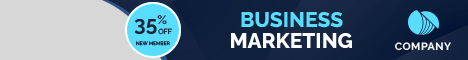
<style>
.page{position:relative;width:468px;height:60px;background:#d7d7d7}
.page>*{position:absolute;margin:0}
.t1{font:21px "Raleway-Bold";color:#192437}
.t2{font:20.9px "Raleway-ExtraBold";color:#58ddfe}
.t3{font:7.2px "Raleway-Medium";color:#192437}
.t4{font:4.9px "Raleway-Medium";color:#192437}
.t5{font:20.9px "Raleway-ExtraBold";color:#ffffff}
.t6{font:10.5px "Raleway-Bold";letter-spacing:0.05em;color:#ffffff}
</style>
<div class="page">
<p class="t1" style="left:134px;top:15px;width:33px;height:20px">35%</p>
<p class="t2" style="left:241px;top:12px;width:102px;height:16px">BUSINESS</p>
<p class="t3" style="left:158px;top:28px;width:14px;height:7px">OFF</p>
<p class="t4" style="left:136px;top:41px;width:34px;height:5px">NEW MEMBER</p>
<p class="t5" style="left:231px;top:33px;width:121px;height:15px">MARKETING</p>
<p class="t6" style="left:395px;top:42px;width:56px;height:9px">COMPANY</p>
</div>
